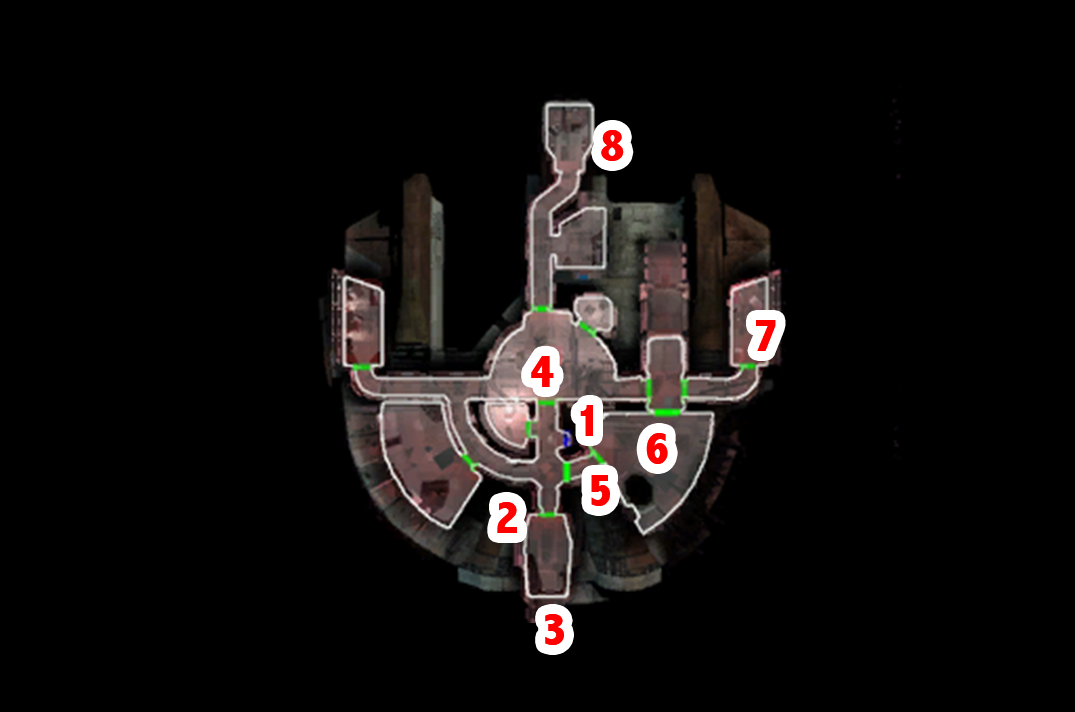
<style>
.page{position:relative;width:1075px;height:712px;background:#000000}
.page>*{position:absolute;margin:0}
.t1{font:48px "AbadiMT-CondensedExtraBold";color:#ff0000}
</style>
<div class="page">
<p class="t1" style="left:601px;top:130px;width:23px;height:31px">8</p>
<p class="t1" style="left:756px;top:320px;width:20px;height:31px">7</p>
<p class="t1" style="left:531px;top:356px;width:23px;height:31px">4</p>
<p class="t1" style="left:580px;top:405px;width:13px;height:31px">1</p>
<p class="t1" style="left:646px;top:433px;width:22px;height:31px">6</p>
<p class="t1" style="left:591px;top:475px;width:19px;height:31px">5</p>
<p class="t1" style="left:497px;top:502px;width:20px;height:31px">2</p>
<p class="t1" style="left:545px;top:614px;width:19px;height:31px">3</p>
</div>
